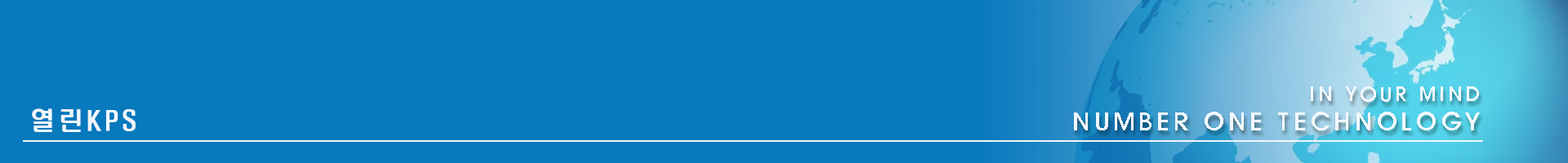
<style>
.page{position:relative;width:1568px;height:163px;background:#0779bd}
.page>*{position:absolute;margin:0}
.t1{font:24.7px/29.4px "HYwulM";letter-spacing:0.14em;color:#f1f8fd;text-transform:uppercase}
.t2{font:24.7px/18px "H2hdrM";letter-spacing:0.14em;color:#f1f8fd;text-transform:uppercase}
.t3{font:19.8px/29.4px "HYwulM";letter-spacing:0.14em;color:#f1f8fd;text-transform:uppercase}
.t4{font:24.7px "H2hdrM";letter-spacing:0.14em;color:#f1f8fd;text-transform:uppercase}
</style>
<div class="page">
<p class="t1" style="left:1074px;top:87px;width:406px;height:44px;text-align:right"><span class="t2">  </span><span class="t3">in Your mind<br></span>Number One Technology</p>
<p class="t4" style="left:32px;top:109px;width:104px;height:23px">열린KPS</p>
</div>
